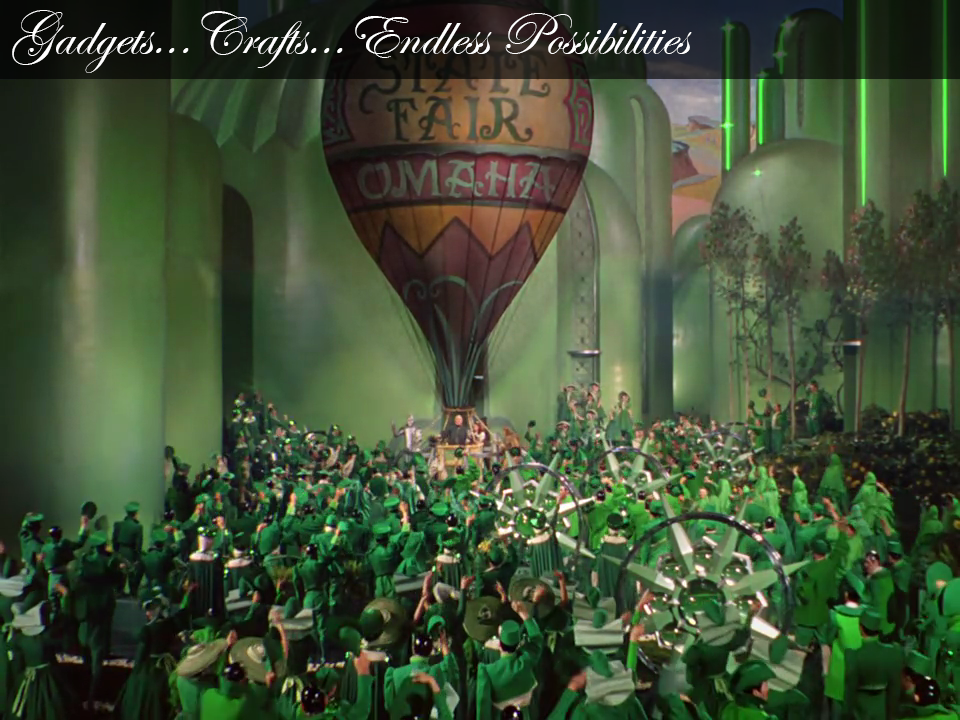
<style>
.page{position:relative;width:960px;height:720px}
.page>*{position:absolute;margin:0}
.t1{font:60px "EdwardianScriptITC";color:#ffffff}
</style>
<div class="page">
<p class="t1" style="left:12px;top:10px;width:680px;height:63px">Gadgets...Crafts...Endless Possibilities</p>
</div>
